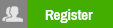
<style>
.page{position:relative;width:113px;height:28px;background:#43ae00}
.page>*{position:absolute;margin:0}
.t1{font:14.5px "ArchivoNarrow-Bold";color:#ffffff}
</style>
<div class="page">
<p class="t1" style="left:45px;top:9px;width:48px;height:14px">Register</p>
</div>
